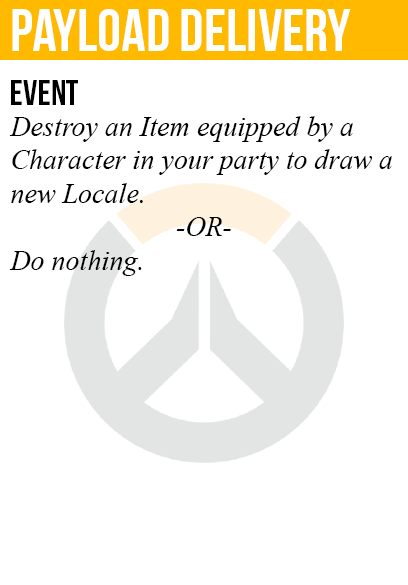
<style>
.page{position:relative;width:408px;height:585px;background:#ffffff}
.page>*{position:absolute;margin:0}
.t1{font:60px "BebasNeue";color:#ffffff}
.t2{font:36px "BebasNeue";color:#000000}
.t3{font:28px "TimesNewRomanPS-ItalicMT";color:#000000}
</style>
<div class="page">
<p class="t1" style="left:12px;top:9px;width:339px;height:42px">payload Delivery</p>
<p class="t2" style="left:11px;top:80px;width:67px;height:25px">event</p>
<p class="t3" style="left:9px;top:116px;width:383px;height:160px">Destroy an Item equipped by a<br>Character in your party to draw a<br>new Locale.<br><br>Do nothing.</p>
<p class="t3" style="left:176px;top:217px;width:55px;height:19px">-OR-</p>
</div>
